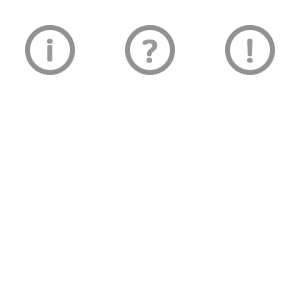
<style>
.page{position:relative;width:300px;height:300px;background:#ffffff}
.page>*{position:absolute;margin:0}
.t1{font:29.7px "NanumSquareRoundEB";color:#999999;font-weight:bold}
</style>
<div class="page">
<p class="t1" style="left:47px;top:38px;width:6px;height:24px">i</p>
<p class="t1" style="left:142px;top:39px;width:16px;height:24px">?</p>
<p class="t1" style="left:247px;top:38px;width:6px;height:25px">!</p>
</div>
